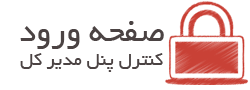
<style>
.page{position:relative;width:250px;height:90px;background:#ffffff}
.page>*{position:absolute;margin:0}
.t1{font:35px "BYekan";color:#4b4343}
.t2{font:20px "BYekan";color:#4b4343}
</style>
<div class="page">
<p class="t1" style="left:20px;top:21px;width:144px;height:28px">صفحه ورود</p>
<p class="t2" style="left:20px;top:53px;width:143px;height:19px">کنترل پنل مدیر کل</p>
</div>
